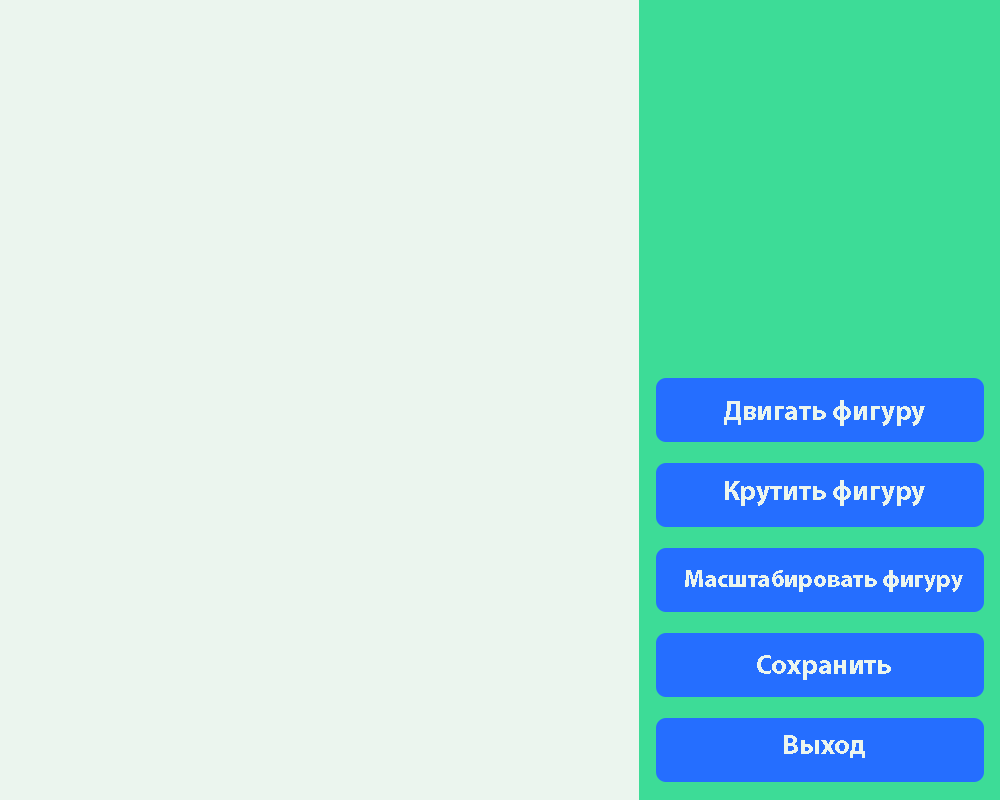
<style>
.page{position:relative;width:1000px;height:800px;background:#ebf5ee}
.page>*{position:absolute;margin:0}
.t1{font:28px "MyriadPro-Bold";color:#ebf5ee}
.t2{font:24px "MyriadPro-Bold";color:#ebf5ee}
</style>
<div class="page">
<p class="t1" style="left:724px;top:400px;width:201px;height:26px">Двигать фигуру</p>
<p class="t1" style="left:725px;top:480px;width:200px;height:26px">Крутить фигуру</p>
<p class="t2" style="left:685px;top:570px;width:278px;height:22px">Масштабировать фигуру</p>
<p class="t1" style="left:757px;top:655px;width:134px;height:25px">Сохранить</p>
<p class="t1" style="left:784px;top:735px;width:81px;height:23px">Выход</p>
</div>
